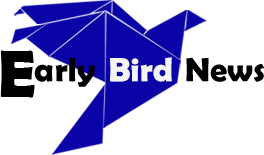
<style>
.page{position:relative;width:264px;height:155px;background:#ffffff}
.page>*{position:absolute;margin:0}
.t1{font:66.7px "BerlinSansFBDemi-Bold";color:#000000}
.t2{font:34.1px "BerlinSansFBDemi-Bold";color:#000000}
.t3{font:34.1px "BerlinSansFBDemi-Bold";color:#f4f4f4}
</style>
<div class="page">
<p class="t1" style="left:0px;top:50px;width:35px;height:48px">E</p>
<p class="t2" style="left:34px;top:57px;width:230px;height:30px">arly <span class="t3">Bird </span>News</p>
</div>
